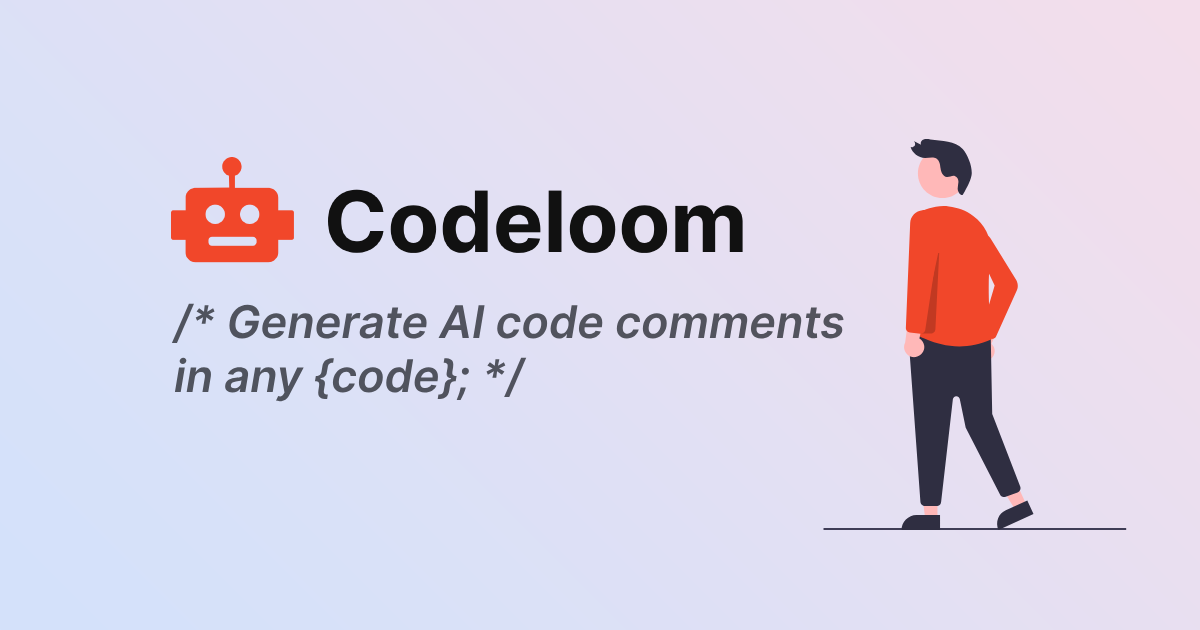
<style>
.page{position:relative;width:1200px;height:630px}
.page>*{position:absolute;margin:0}
.t1{font:45px "Inter-SemiBoldItalic";color:#50535e}
</style>
<div class="page">
<p class="t1" style="left:171px;top:303px;width:673px;height:99px">/* Generate AI code comments<br>in any {code}; */</p>
</div>
